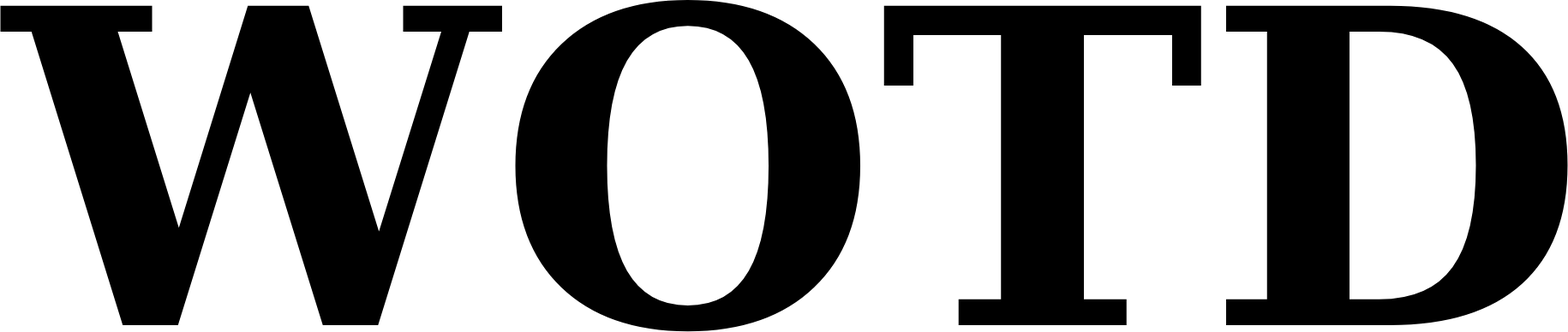
<style>
.page{position:relative;width:1568px;height:332px;background:#ffffff}
.page>*{position:absolute;margin:0}
.t1{font:438.7px "DejaVuSerif-Bold";color:#000000}
</style>
<div class="page">
<p class="t1" style="left:0px;top:0px;width:1568px;height:332px">WOTD</p>
</div>
